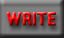
<style>
.page{position:relative;width:64px;height:38px}
.page>*{position:absolute;margin:0}
.t1{font:18px "GothicXB-HM"}
</style>
<div class="page">
<p class="t1" style="left:6px;top:12px;width:50px;height:14px">WRITE</p>
</div>
